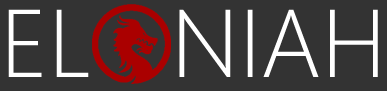
<style>
.page{position:relative;width:387px;height:91px;background:#333333}
.page>*{position:absolute;margin:0}
.t1{font:96px "SegoeUI-Light";color:#ffffff}
</style>
<div class="page">
<p class="t1" style="left:8px;top:9px;width:370px;height:68px">EL   NIAH</p>
</div>
